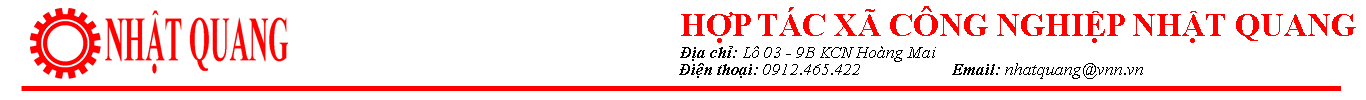
<style>
.page{position:relative;width:1366px;height:100px;background:#ffffff}
.page>*{position:absolute;margin:0}
.t1{font:33.3px "TimesNewRomanPS-BoldMT";color:#fe0000}
.t2{font:16.7px "TimesNewRomanPS-ItalicMT";color:#000000}
.t3{font:16.7px "TimesNewRomanPS-BoldItalicMT";color:#000000}
</style>
<div class="page">
<p class="t1" style="left:681px;top:6px;width:675px;height:37px">HỢP TÁC XÃ CÔNG NGHIỆP NHẬT QUANG</p>
<p class="t2" style="left:680px;top:46px;width:256px;height:16px"><span class="t3">Địa chỉ:</span> Lô 03 - 9B KCN Hoàng Mai</p>
<p class="t2" style="left:679px;top:63px;width:181px;height:15px"><span class="t3">Điện thoại</span>: 0912.465.422</p>
<p class="t2" style="left:952px;top:63px;width:191px;height:16px"><span class="t3">Email:</span> nhatquang@vnn.vn</p>
</div>
